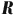
<style>
.page{position:relative;width:16px;height:16px;background:#ffffff}
.page>*{position:absolute;margin:0}
.t1{font:18px "BodoniBE-BoldCnItalic";color:#131313}
</style>
<div class="page">
<p class="t1" style="left:1px;top:1px;width:12px;height:14px">R</p>
</div>
